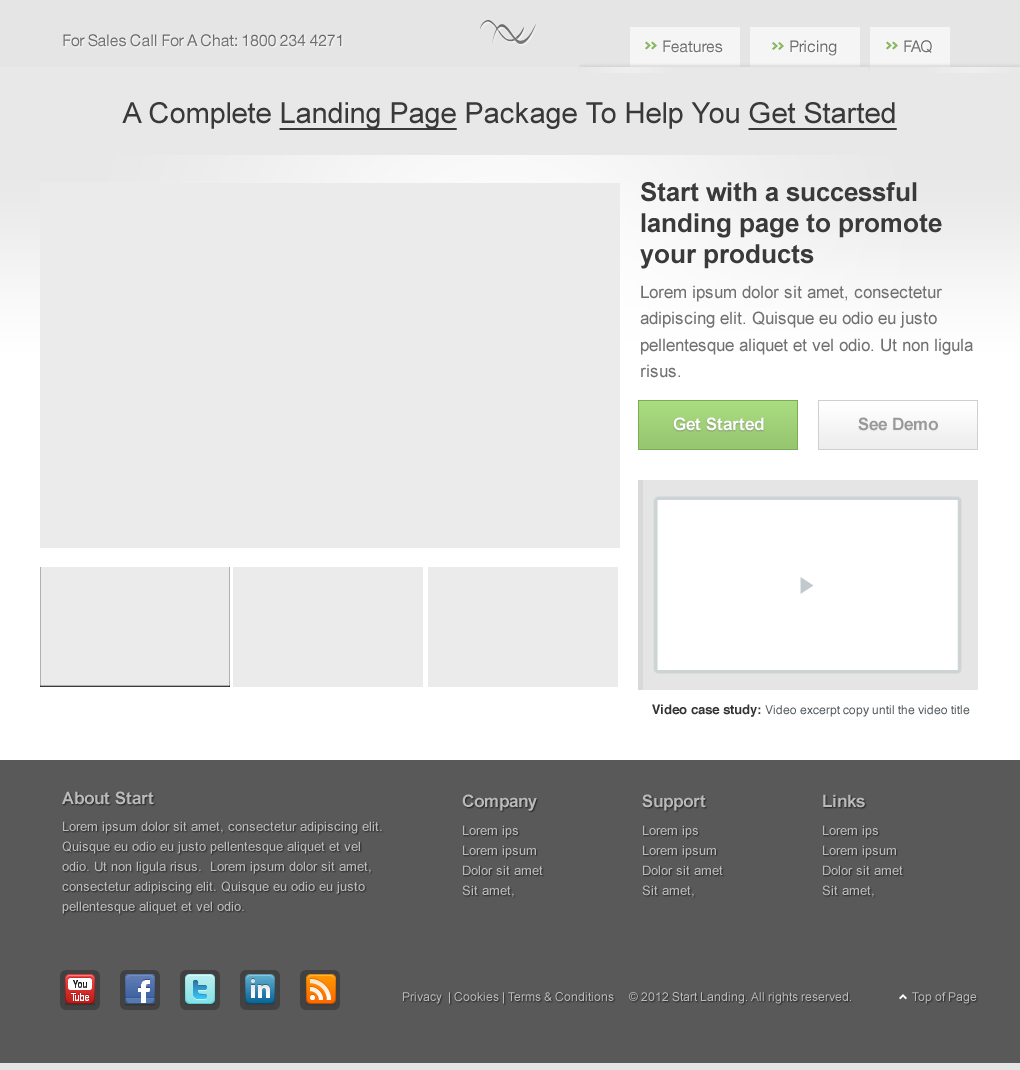
<style>
.page{position:relative;width:1020px;height:1070px;background:#595959}
.page>*{position:absolute;margin:0}
.t1{font:16px "HelveticaNeue-Roman";letter-spacing:-0.02em;color:#717171}
.t2{font:16px "HelveticaNeue-Roman";letter-spacing:-0.02em;color:#737373}
.t3{font:16px "HelveticaNeue-Roman";letter-spacing:-0.02em;color:#707070}
.t4{font:29px "ArialMT";color:#393939}
.t5{font:29px "ArialMT";color:#393939;text-decoration:underline}
.t6{font:26px/31.2px "Arial-BoldMT";color:#3a3a3a}
.t7{font:17px/26.2px "ArialMT";color:#717171}
.t8{font:17px "Arial-BoldMT";color:#fefefe}
.t9{font:17px "Arial-BoldMT";color:#999999}
.t10{font:12px "Helvetica";color:#53595e}
.t11{font:13px "Helvetica-Bold";color:#333333}
.t12{font:17px "Arial-BoldMT";color:#bbbbbb}
.t13{font:17px "Arial-BoldMT";color:#bababa}
.t14{font:13px/20px "ArialMT";color:#bbbbbb}
.t15{font:13px "ArialMT";color:#bbbbbb}
.t16{font:12px "ArialMT";color:#bbbbbb}
</style>
<div class="page">
<p class="t1" style="left:63px;top:34px;width:279px;height:13px">For Sales Call For A Chat: 1800 234 4271</p>
<p class="t2" style="left:663px;top:40px;width:60px;height:13px">Features</p>
<p class="t3" style="left:790px;top:40px;width:47px;height:16px">Pricing</p>
<p class="t1" style="left:904px;top:40px;width:28px;height:13px">FAQ</p>
<p class="t4" style="left:122px;top:102px;width:775px;height:28px">A Complete <span class="t5">Landing Page</span> Package To Help You <span class="t5">Get Started</span></p>
<p class="t6" style="left:640px;top:182px;width:302px;height:87px">Start with a successful landing page to promote your products</p>
<p class="t7" style="left:640px;top:285px;width:333px;height:93px">Lorem ipsum dolor sit amet, consectetur adipiscing elit. Quisque eu odio eu justo pellentesque aliquet et vel odio. Ut non ligula risus.</p>
<p class="t8" style="left:673px;top:417px;width:91px;height:14px">Get Started</p>
<p class="t9" style="left:858px;top:417px;width:80px;height:14px">See Demo</p>
<p class="t10" style="left:652px;top:704px;width:318px;height:13px"><span class="t11">Video case study: </span>Video excerpt copy until the video title</p>
<p class="t12" style="left:62px;top:791px;width:92px;height:14px">About Start</p>
<p class="t13" style="left:462px;top:794px;width:75px;height:17px">Company</p>
<p class="t13" style="left:642px;top:794px;width:64px;height:17px">Support</p>
<p class="t13" style="left:823px;top:794px;width:42px;height:14px">Links</p>
<p class="t14" style="left:62px;top:821px;width:320px;height:93px">Lorem ipsum dolor sit amet, consectetur adipiscing elit. Quisque eu odio eu justo pellentesque aliquet et vel odio. Ut non ligula risus.  Lorem ipsum dolor sit amet, consectetur adipiscing elit. Quisque eu odio eu justo pellentesque aliquet et vel odio.</p>
<p class="t15" style="left:463px;top:825px;width:55px;height:13px">Lorem ips</p>
<p class="t15" style="left:643px;top:825px;width:55px;height:13px">Lorem ips</p>
<p class="t15" style="left:823px;top:825px;width:55px;height:13px">Lorem ips</p>
<p class="t15" style="left:463px;top:845px;width:73px;height:13px">Lorem ipsum</p>
<p class="t15" style="left:643px;top:845px;width:73px;height:13px">Lorem ipsum</p>
<p class="t15" style="left:823px;top:845px;width:73px;height:13px">Lorem ipsum</p>
<p class="t15" style="left:463px;top:865px;width:80px;height:10px">Dolor sit amet</p>
<p class="t15" style="left:643px;top:865px;width:80px;height:10px">Dolor sit amet</p>
<p class="t15" style="left:823px;top:865px;width:80px;height:10px">Dolor sit amet</p>
<p class="t15" style="left:462px;top:885px;width:52px;height:12px">Sit amet,</p>
<p class="t15" style="left:642px;top:885px;width:52px;height:12px">Sit amet,</p>
<p class="t15" style="left:822px;top:885px;width:52px;height:12px">Sit amet,</p>
<p class="t16" style="left:403px;top:992px;width:448px;height:12px">Privacy  | Cookies | Terms &amp; Conditions  © 2012 Start Landing. All rights reserved.</p>
<p class="t16" style="left:912px;top:992px;width:65px;height:12px">Top of Page</p>
</div>
